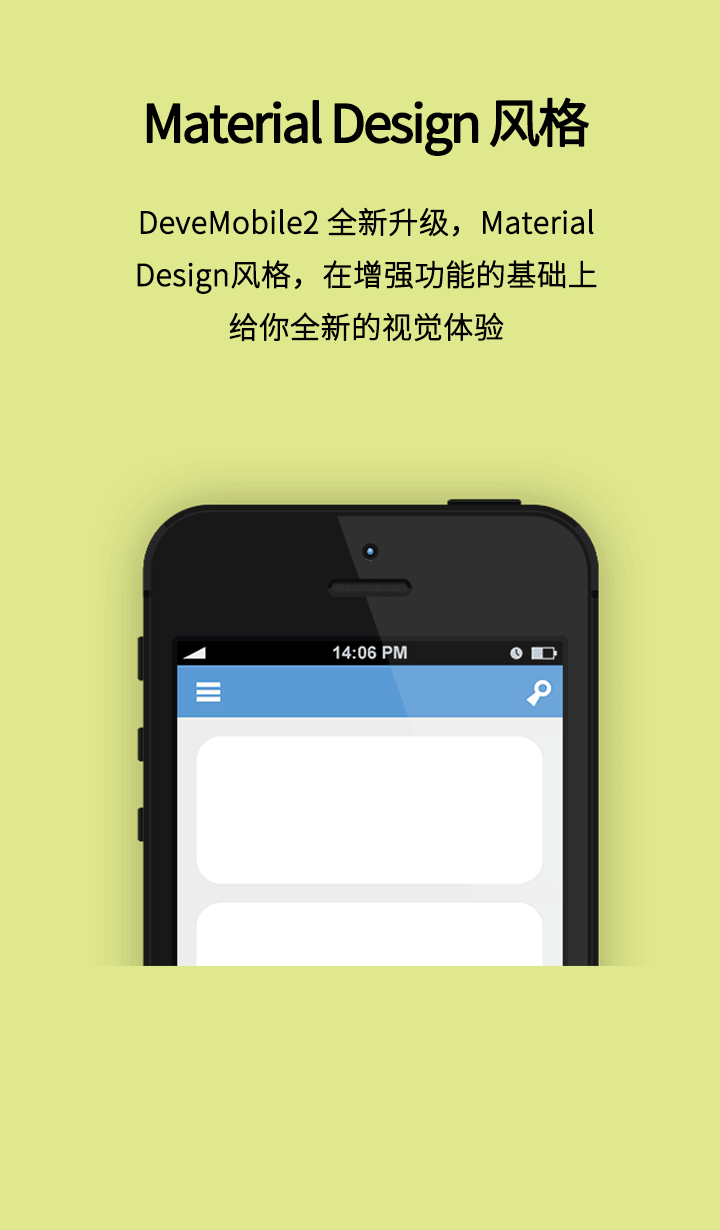
<style>
.page{position:relative;width:720px;height:1230px;background:#dfe88c}
.page>*{position:absolute;margin:0}
.t1{font:52px "SourceHanSansCN-Regular";letter-spacing:-0.075em;color:#000000;font-weight:bold}
.t2{font:30px "SourceHanSansCN-Light";letter-spacing:-0.005em;color:#000000;font-weight:bold}
</style>
<div class="page">
<p class="t1" style="left:146px;top:97px;width:443px;height:59px">Material Design 风格</p>
<p class="t2" style="left:137px;top:207px;width:460px;height:135px;text-align:center">DeveMobile2 全新升级，Material Design风格，在增强功能的基础上给你全新的视觉体验</p>
</div>
